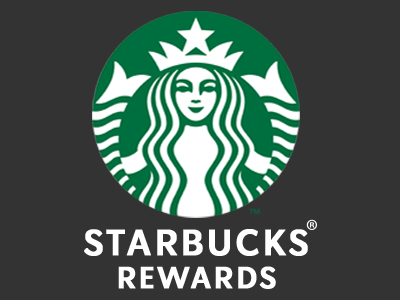
<style>
.page{position:relative;width:400px;height:300px;background:#333333}
.page>*{position:absolute;margin:0}
.t1{font:36px/33px "SoDoSans-SemiBold";letter-spacing:0.05em;color:#ffffff;font-weight:bold}
.t2{font:30px/33px "SoDoSans-SemiBold";letter-spacing:0.05em;color:#ffffff;font-weight:bold}
</style>
<div class="page">
<p class="t1" style="left:84px;top:229px;width:224px;height:60px;text-align:center">STARBUCKS<br><span class="t2">REWARDS</span></p>
</div>
